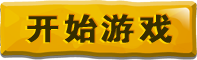
<style>
.page{position:relative;width:197px;height:60px}
.page>*{position:absolute;margin:0}
.t1{font:31.5px "Jdahei";letter-spacing:0.05em;color:#362d00;font-weight:bold;scale:1.11 1}
</style>
<div class="page">
<p class="t1" style="left:27px;top:13px;width:146px;height:30px">开始游戏</p>
</div>
